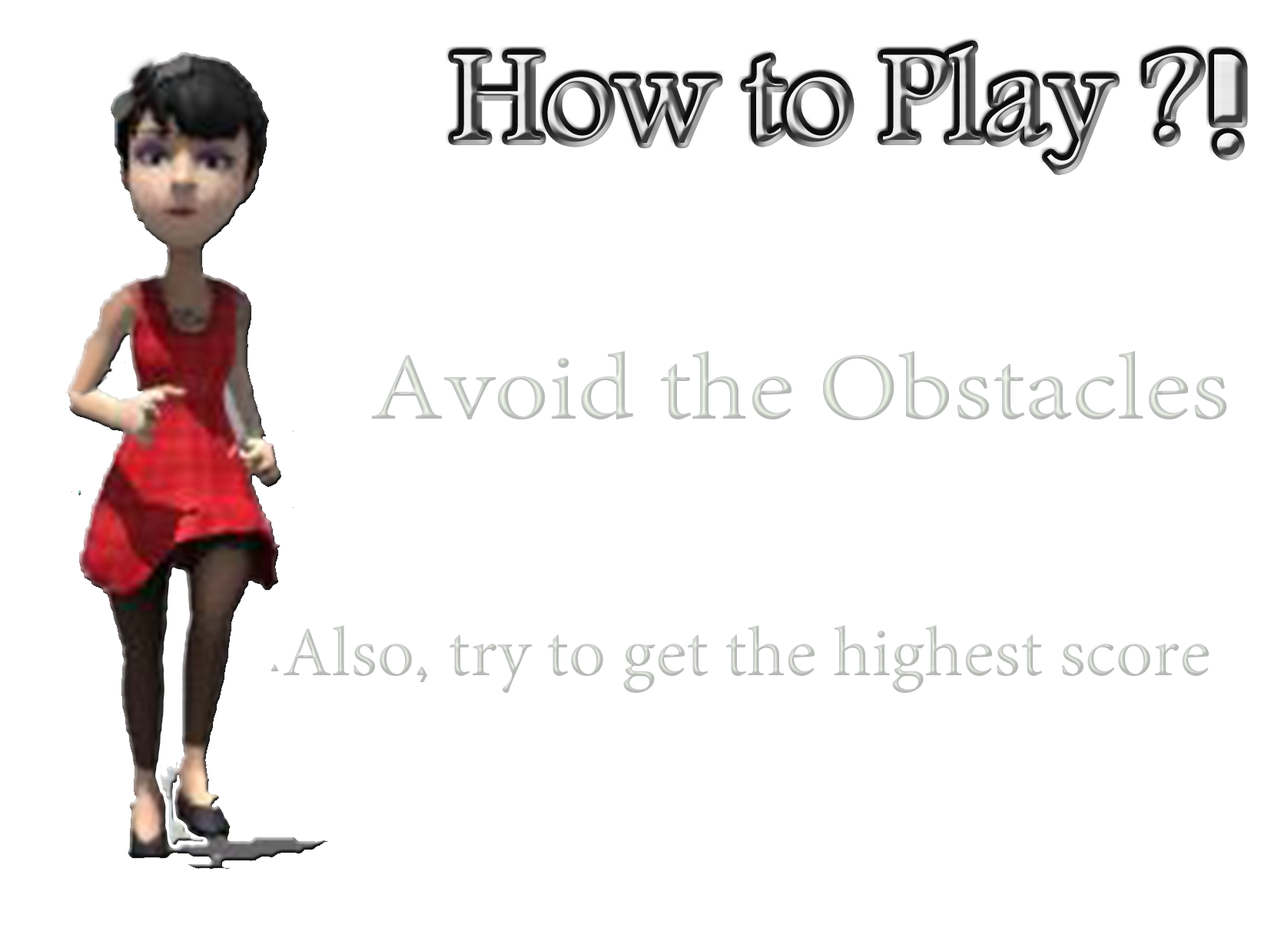
<style>
.page{position:relative;width:1281px;height:931px;background:#ffffff}
.page>*{position:absolute;margin:0}
.t1{font:95.3px "";scale:1.13 1}
.t2{font:70.5px "";color:#c4c8c3}
</style>
<div class="page">
<p class="t1" style="left:371px;top:351px;width:855px;height:69px">Avoid the Obstacles</p>
<p class="t2" style="left:270px;top:625px;width:938px;height:68px">Also, try to get the highest score.</p>
</div>
